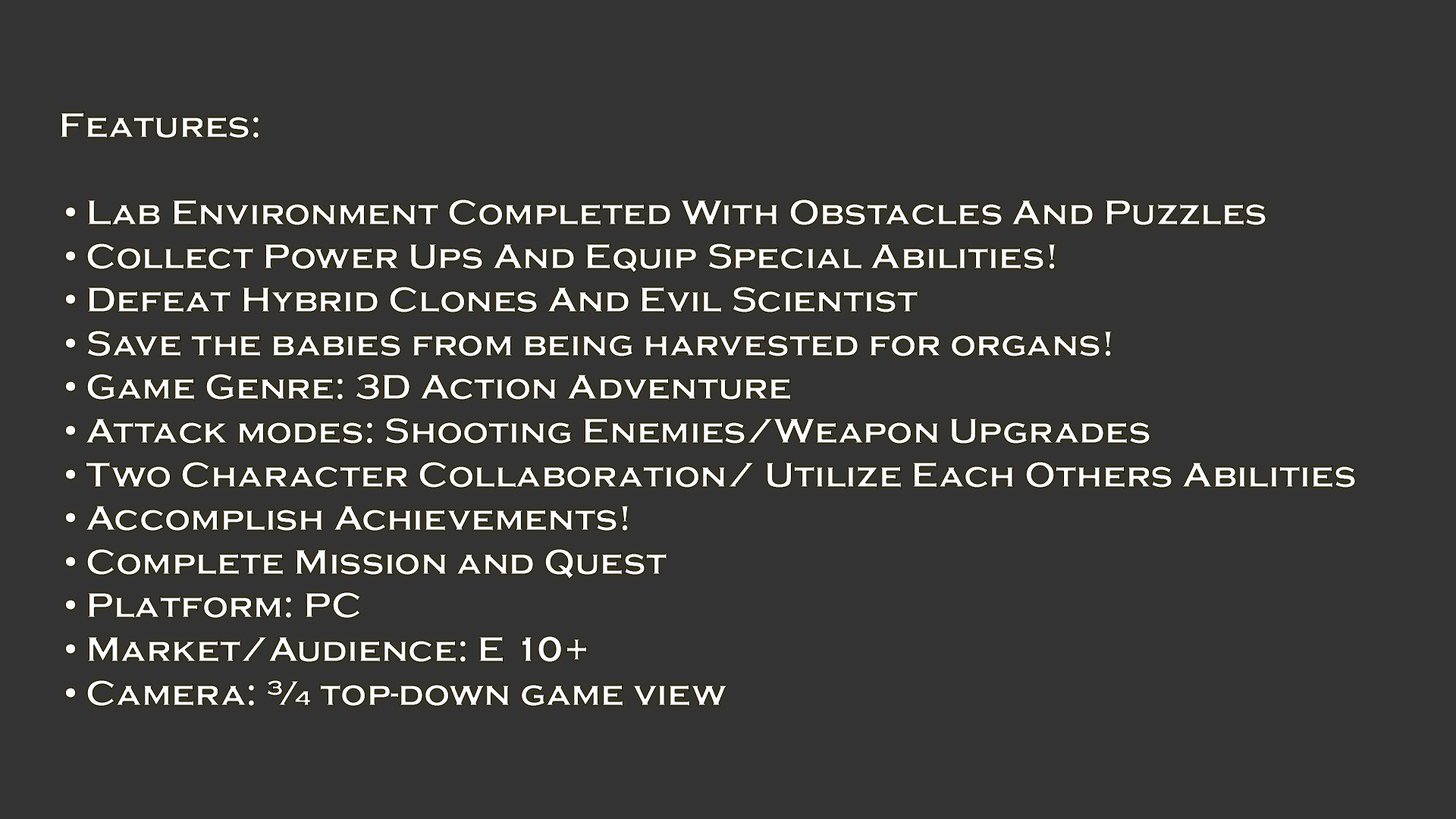
<style>
.page{position:relative;width:1456px;height:819px;background:#333333}
.page>*{position:absolute;margin:0}
.t1{font:36.4px "CopperplateGothic-Bold";color:#ffffff}
</style>
<div class="page">
<p class="t1" style="left:60px;top:111px;width:1295px;height:596px">Features:<br><br>• Lab Environment Completed With Obstacles And Puzzles<br>• Collect Power Ups And Equip Special Abilities!<br>• Defeat Hybrid Clones And Evil Scientist <br>• Save the babies from being harvested for organs!<br>• Game Genre: 3D Action Adventure<br>• Attack modes: Shooting Enemies/Weapon Upgrades<br>• Two Character Collaboration/ Utilize Each Others Abilities<br>• Accomplish Achievements! <br>• Complete Mission and Quest <br>• Platform: PC <br>• Market/Audience: E 10+ <br>• Camera: ¾ top-down game view</p>
</div>
